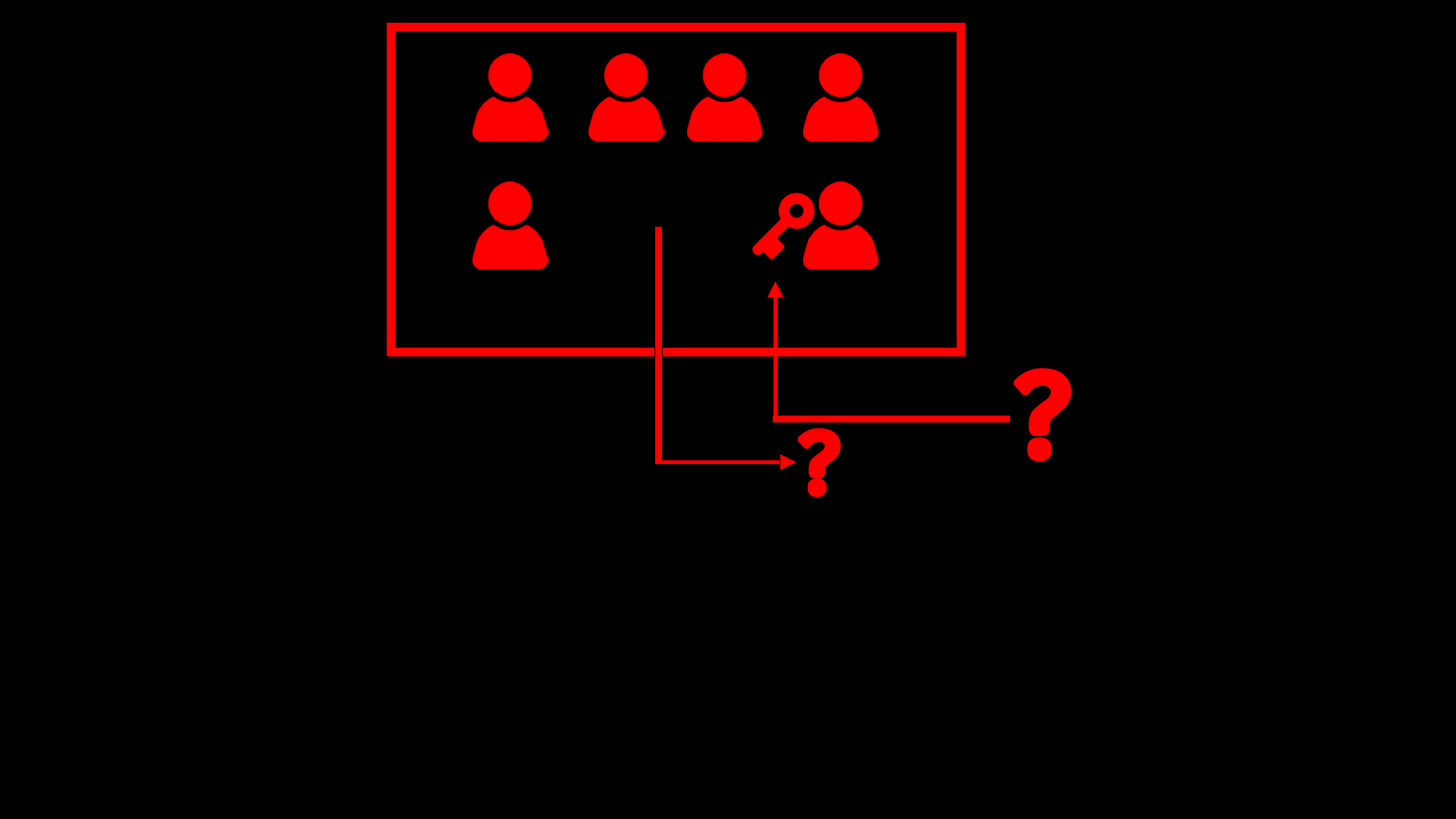
<style>
.page{position:relative;width:1456px;height:819px;background:#000000}
.page>*{position:absolute;margin:0}
.t1{font:131.2px "Montio-Regular";color:#ff0000;font-weight:bold}
.t2{font:96.3px "Montio-Regular";color:#ff0000;font-weight:bold}
</style>
<div class="page">
<p class="t1" style="left:1013px;top:368px;width:59px;height:94px">?</p>
<p class="t2" style="left:797px;top:428px;width:44px;height:69px">?</p>
</div>
